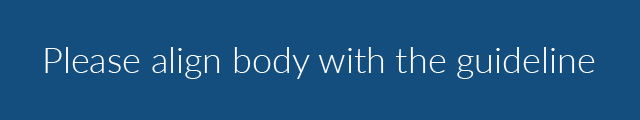
<style>
.page{position:relative;width:640px;height:120px;background:#144e7f}
.page>*{position:absolute;margin:0}
.t1{font:36px "Lato-Light";color:#ffffff}
</style>
<div class="page">
<p class="t1" style="left:45px;top:47px;width:550px;height:32px">Please align body with the guideline</p>
</div>
